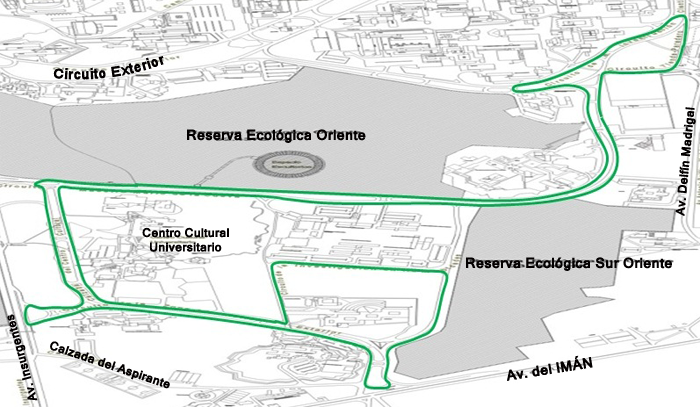
<style>
.page{position:relative;width:700px;height:407px;background:#ffffff}
.page>*{position:absolute;margin:0}
.t1{font:14px "Kartika-Bold";color:#030000}
.t2{font:12px "Kartika-Bold";color:#030000}
</style>
<div class="page">
<p class="t1" style="left:53px;top:56px;width:111px;height:24px;rotate:-7deg">Circuito Exterior</p>
<p class="t2" style="left:675px;top:107px;width:21px;height:109px;rotate:-85deg">Av. Delfín Madrigal</p>
<p class="t1" style="left:187px;top:129px;width:179px;height:14px">Reserva Ecológica Oriente</p>
<p class="t2" style="left:142px;top:227px;width:87px;height:25px">Centro Cultural<br>  Universitario</p>
<p class="t1" style="left:466px;top:257px;width:206px;height:14px">Reserva Ecológica Sur Oriente</p>
<p class="t2" style="left:7px;top:314px;width:31px;height:87px;rotate:-105deg">Av. Insurgentes</p>
<p class="t2" style="left:50px;top:341px;width:120px;height:48px;rotate:18deg">Calzada del Aspirante</p>
<p class="t1" style="left:507px;top:355px;width:86px;height:26px;rotate:-9deg">Av. del IMÁN</p>
</div>
